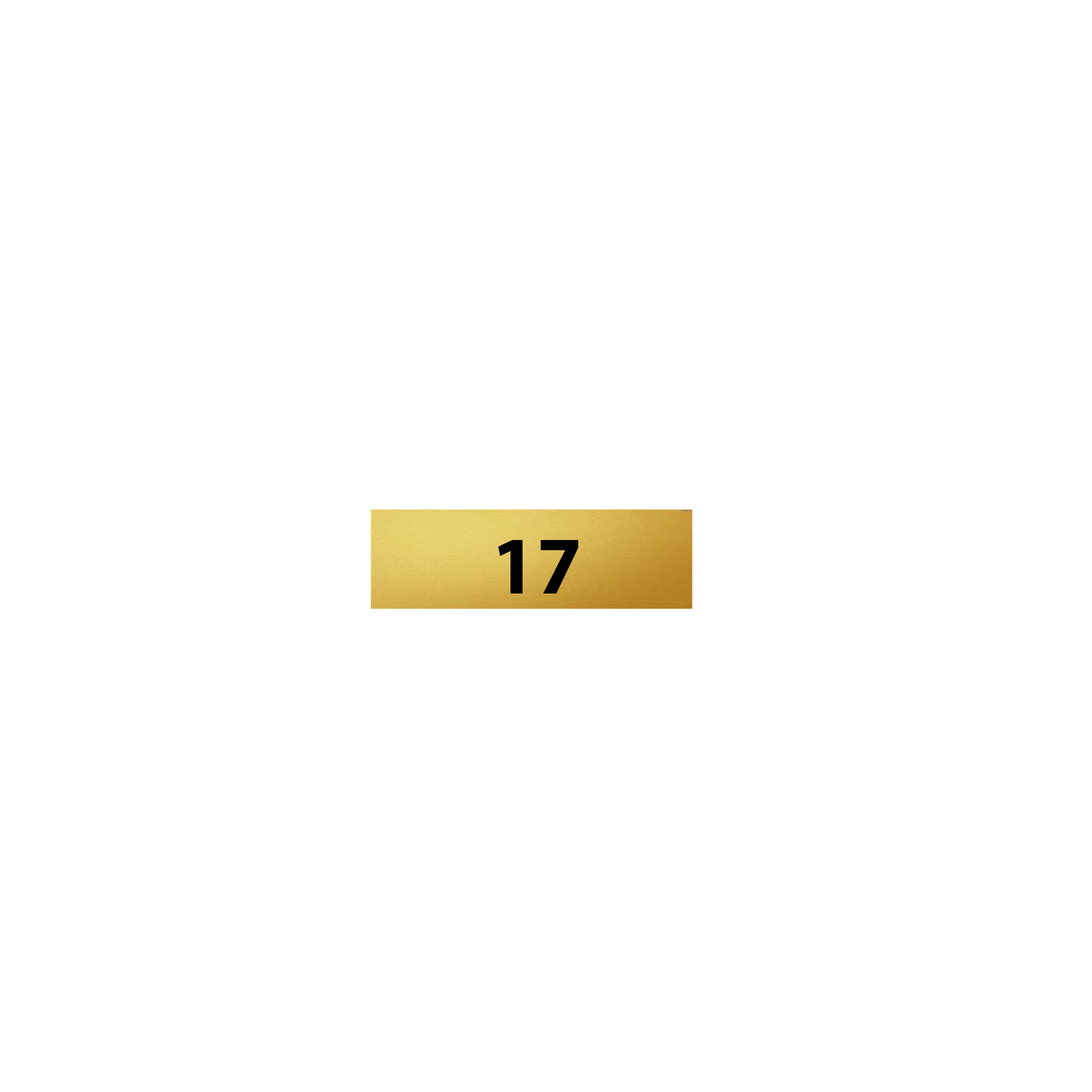
<style>
.page{position:relative;width:1092px;height:1092px;background:#ffffff}
.page>*{position:absolute;margin:0}
.t1{font:81.9px "MyriadPro-Bold";color:#000000}
</style>
<div class="page">
<p class="t1" style="left:498px;top:540px;width:80px;height:53px">17</p>
</div>
